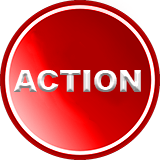
<style>
.page{position:relative;width:160px;height:160px;background:#ffffff}
.page>*{position:absolute;margin:0}
.t1{font:30px "Arial-Black"}
</style>
<div class="page">
<p class="t1" style="left:13px;top:70px;width:128px;height:22px">ACTION</p>
</div>
